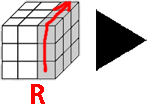
<style>
.page{position:relative;width:162px;height:108px;background:#ffffff}
.page>*{position:absolute;margin:0}
.t1{font:27px "MyriadPro-Regular";color:#ff0000;font-weight:bold}
</style>
<div class="page">
<p class="t1" style="left:31px;top:84px;width:14px;height:20px">R</p>
</div>
